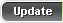
<style>
.page{position:relative;width:63px;height:23px}
.page>*{position:absolute;margin:0}
.t1{font:10.7px "Arial-BoldMT";letter-spacing:0.025em;color:#fdfdfd}
</style>
<div class="page">
<p class="t1" style="left:14px;top:7px;width:38px;height:10px">Update</p>
</div>
